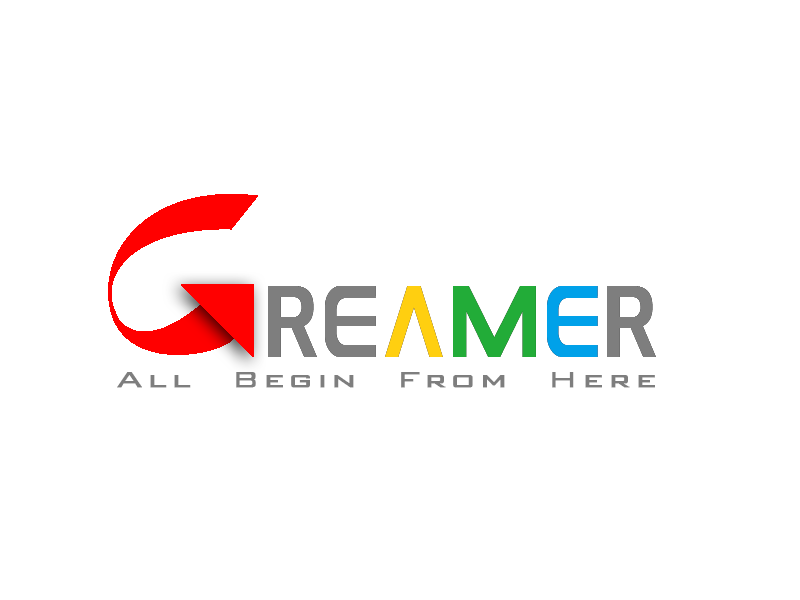
<style>
.page{position:relative;width:800px;height:600px;background:#ffffff}
.page>*{position:absolute;margin:0}
.t1{font:88.3px "GAMECUBENDualSet";letter-spacing:-0.1em;color:#7e7e7e}
.t2{font:88.3px "GAMECUBENDualSet";letter-spacing:-0.1em;color:#ffcf10}
.t3{font:88.3px "GAMECUBENDualSet";letter-spacing:-0.1em;color:#22ac38}
.t4{font:88.3px "GAMECUBENDualSet";letter-spacing:-0.1em;color:#00a1e9}
.t5{font:29.2px "BankGothicBT-Light";letter-spacing:0.1em;color:#7e7e7e;font-weight:bold;scale:1.23 1}
</style>
<div class="page">
<p class="t1" style="left:268px;top:286px;width:388px;height:71px">re<span class="t2">a</span><span class="t3">m</span><span class="t4">e</span>r</p>
<p class="t5" style="left:117px;top:372px;width:538px;height:16px">All  Begin  From  Here</p>
</div>
